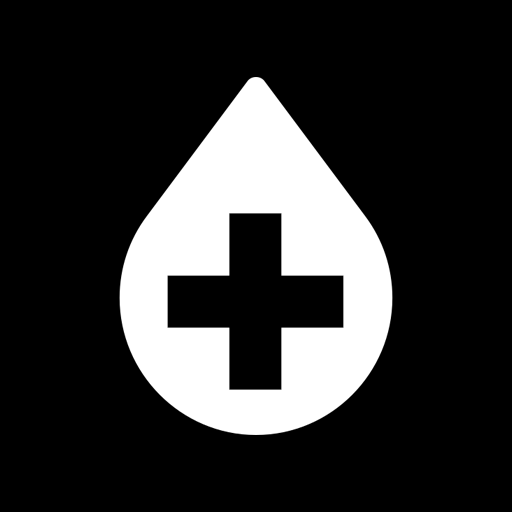
<style>
.page{position:relative;width:512px;height:512px;background:#000000}
.page>*{position:absolute;margin:0}
.t1{font:331px "Arial-Black";color:#000000}
</style>
<div class="page">
<p class="t1" style="left:167px;top:213px;width:177px;height:177px">+</p>
</div>
